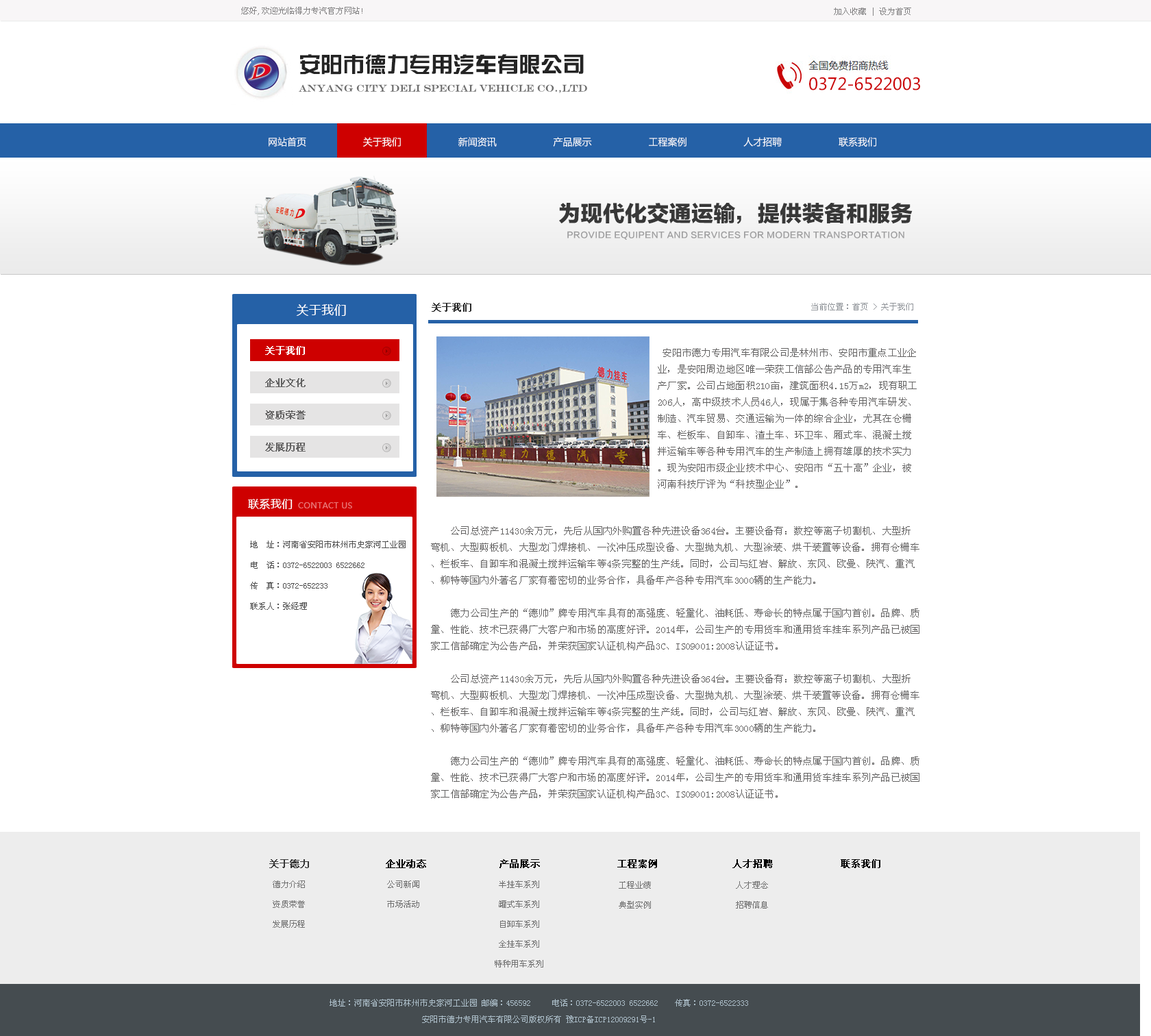
<style>
.page{position:relative;width:1151px;height:1036px;background:#ffffff}
.page>*{position:absolute;margin:0}
.t1{font:8.2px "SimSun";color:#848384}
.t2{font:21.9px "FZZYJW--GB1-0";color:#242424}
.t3{font:16.4px "MicrosoftYaHei";color:#cc0407}
.t4{font:9.6px "EngraversMT";color:#6d6d6d}
.t5{font:9.6px "MicrosoftYaHei";color:#ffffff}
.t6{font:21.9px "FZLTTHJW--GB1-0";color:#383838}
.t7{font:8.2px "FZLTZHK--GBK1-0";letter-spacing:0.02em;color:#9e9e9f}
.t8{font:12.3px "MicrosoftYaHei";letter-spacing:0.02em;color:#ffffff}
.t9{font:9.6px "SimSun";color:#2a2a2a;font-weight:bold}
.t10{font:8.2px "SimSun";color:#90959a}
.t11{font:9.6px "SimSun";letter-spacing:0.02em;color:#ffffff;font-weight:bold}
.t12{font:9.6px/16.4px "SimSun";letter-spacing:0.02em;color:#636262}
.t13{font:9.6px "SimSun";letter-spacing:0.02em;color:#636262;font-weight:bold}
.t14{font:11px "MicrosoftYaHei";letter-spacing:0.02em;color:#fefefe}
.t15{font:8.2px "MicrosoftYaHei";letter-spacing:0.02em;color:#e97575}
.t16{font:8.2px/20.6px "SimSun";color:#505050}
.t17{font:9.6px "SimSun";color:#3a3a3a;font-weight:bold}
.t18{font:9.6px "SimSun";color:#000000;font-weight:bold}
.t19{font:8.2px/19.9px "SimSun";color:#727272}
.t20{font:8.2px/16.4px "SimSun";color:#adbfca}
</style>
<div class="page">
<p class="t1" style="left:241px;top:7px;width:121px;height:8px">您好,欢迎光临得力专汽官方网站!</p>
<p class="t1" style="left:834px;top:8px;width:77px;height:8px">加入收藏 | 设为首页</p>
<p class="t2" style="left:300px;top:54px;width:284px;height:21px">安阳市德力专用汽车有限公司</p>
<p class="t3" style="left:809px;top:77px;width:111px;height:13px">0372-6522003</p>
<p class="t4" style="left:299px;top:84px;width:288px;height:9px">ANYANG CITY DELI SPECIAL VEHICLE CO.,LTD</p>
<p class="t5" style="left:269px;top:137px;width:607px;height:10px">网站首页                    关于我们                    新闻资讯                    产品展示                    工程案例                    人才招聘                    联系我们</p>
<p class="t6" style="left:559px;top:203px;width:354px;height:21px">为现代化交通运输，提供装备和服务</p>
<p class="t7" style="left:567px;top:231px;width:337px;height:9px">PROVIDE EQUIPENT AND SERVICES FOR MODERN TRANSPORTATION</p>
<p class="t8" style="left:296px;top:304px;width:50px;height:12px">关于我们</p>
<p class="t9" style="left:432px;top:303px;width:39px;height:9px">关于我们</p>
<p class="t10" style="left:811px;top:303px;width:102px;height:7px">当前位置：首页 &gt; 关于我们</p>
<p class="t11" style="left:265px;top:346px;width:40px;height:9px">关于我们</p>
<p class="t12" style="left:658px;top:348px;width:259px;height:141px">安阳市德力专用汽车有限公司是林州市、安阳市重点工业企业，是安阳周边地区唯一荣获工信部公告产品的专用汽车生产厂家。公司占地面积210亩，建筑面积4.15万m2，现有职工206人，高中级技术人员46人，现属于集各种专用汽车研发、制造、汽车贸易、交通运输为一体的综合企业，尤其在仓栅车、栏板车、自卸车、渣土车、环卫车、厢式车、混凝土搅拌运输车等各种专用汽车的生产制造上拥有雄厚的技术实力。现为安阳市级企业技术中心、安阳市“五十高”企业，被河南科技厅评为“科技型企业”。</p>
<p class="t13" style="left:265px;top:378px;width:41px;height:9px">企业文化</p>
<p class="t13" style="left:265px;top:410px;width:41px;height:9px">资质荣誉</p>
<p class="t13" style="left:265px;top:443px;width:41px;height:9px">发展历程</p>
<p class="t14" style="left:248px;top:499px;width:45px;height:11px">联系我们</p>
<p class="t15" style="left:298px;top:502px;width:54px;height:6px">CONTACT US</p>
<p class="t12" style="left:431px;top:526px;width:488px;height:272px">公司总资产11430余万元，先后从国内外购置各种先进设备364台。主要设备有：数控等离子切割机、大型折弯机、大型剪板机、大型龙门焊接机、一次冲压成型设备、大型抛丸机、大型涂装、烘干装置等设备。拥有仓栅车、栏板车、自卸车和混凝土搅拌运输车等4条完整的生产线。同时，公司与红岩、解放、东风、欧曼、陕汽、重汽、柳特等国内外著名厂家有着密切的业务合作，具备年产各种专用汽车3000辆的生产能力。<br><br>    德力公司生产的“德帅”牌专用汽车具有的高强度、轻量化、油耗低、寿命长的特点属于国内首创。品牌、质量、性能、技术已获得广大客户和市场的高度好评。2014年，公司生产的专用货车和通用货车挂车系列产品已被国家工信部确定为公告产品，并荣获国家认证机构产品3C、ISO9001:2008认证证书。<br><br>    公司总资产11430余万元，先后从国内外购置各种先进设备364台。主要设备有：数控等离子切割机、大型折弯机、大型剪板机、大型龙门焊接机、一次冲压成型设备、大型抛丸机、大型涂装、烘干装置等设备。拥有仓栅车、栏板车、自卸车和混凝土搅拌运输车等4条完整的生产线。同时，公司与红岩、解放、东风、欧曼、陕汽、重汽、柳特等国内外著名厂家有着密切的业务合作，具备年产各种专用汽车3000辆的生产能力。<br><br>    德力公司生产的“德帅”牌专用汽车具有的高强度、轻量化、油耗低、寿命长的特点属于国内首创。品牌、质量、性能、技术已获得广大客户和市场的高度好评。2014年，公司生产的专用货车和通用货车挂车系列产品已被国家工信部确定为公告产品，并荣获国家认证机构产品3C、ISO9001:2008认证证书。</p>
<p class="t16" style="left:250px;top:541px;width:156px;height:69px">地  址：河南省安阳市林州市史家河工业园<br>电  话：0372-6522003 6522662<br>传  真：0372-652233<br>联系人：张经理</p>
<p class="t17" style="left:269px;top:859px;width:40px;height:9px">关于德力</p>
<p class="t18" style="left:386px;top:859px;width:40px;height:9px">企业动态</p>
<p class="t18" style="left:499px;top:859px;width:41px;height:9px">产品展示</p>
<p class="t18" style="left:617px;top:859px;width:40px;height:9px">工程案例</p>
<p class="t18" style="left:732px;top:859px;width:41px;height:9px">人才招聘</p>
<p class="t18" style="left:841px;top:859px;width:39px;height:9px">联系我们</p>
<p class="t19" style="left:273px;top:880px;width:32px;height:48px">德力介绍<br>资质荣誉<br>发展历程</p>
<p class="t19" style="left:387px;top:880px;width:32px;height:28px">公司新闻<br>市场活动</p>
<p class="t19" style="left:495px;top:880px;width:48px;height:87px;text-align:center">半挂车系列<br>罐式车系列<br>自卸车系列<br>全挂车系列<br>特种用车系列</p>
<p class="t19" style="left:619px;top:881px;width:32px;height:28px;text-align:center">工程业绩<br>典型实例</p>
<p class="t19" style="left:736px;top:881px;width:32px;height:28px;text-align:center">人才理念<br>招聘信息</p>
<p class="t20" style="left:330px;top:999px;width:418px;height:24px;text-align:center">地址：河南省安阳市林州市史家河工业园 邮编：456592 　　电话：0372-6522003 6522662　　传真：0372-6522333<br>安阳市德力专用汽车有限公司版权所有 豫ICP备ICP12009291号-1</p>
</div>
